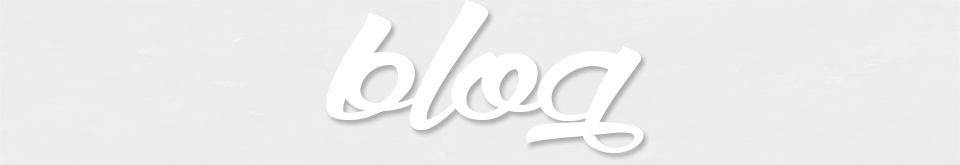
<style>
.page{position:relative;width:960px;height:165px;background:#eeeced}
.page>*{position:absolute;margin:0}
.t1{font:435.4px "WolfintheCity";color:#ffffff;scale:1.57 1}
</style>
<div class="page">
<p class="t1" style="left:326px;top:0px;width:318px;height:153px">blog</p>
</div>
